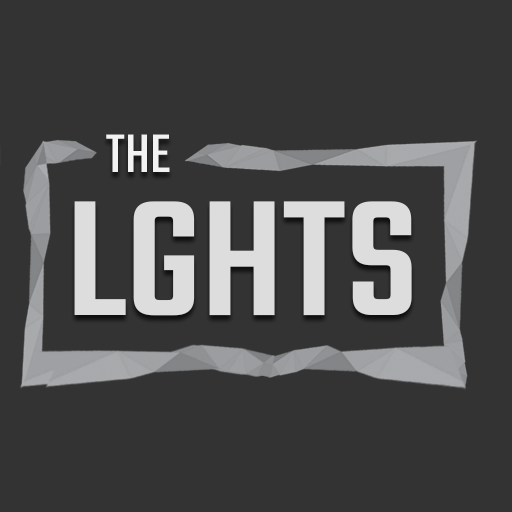
<style>
.page{position:relative;width:512px;height:512px;background:#333333}
.page>*{position:absolute;margin:0}
.t1{font:60px "Teko-Regular";color:#f2f2f2}
.t2{font:180px "Teko-Medium";color:#dddddd}
</style>
<div class="page">
<p class="t1" style="left:106px;top:134px;width:64px;height:38px">THE</p>
<p class="t2" style="left:74px;top:201px;width:338px;height:115px">LGHTS</p>
</div>
